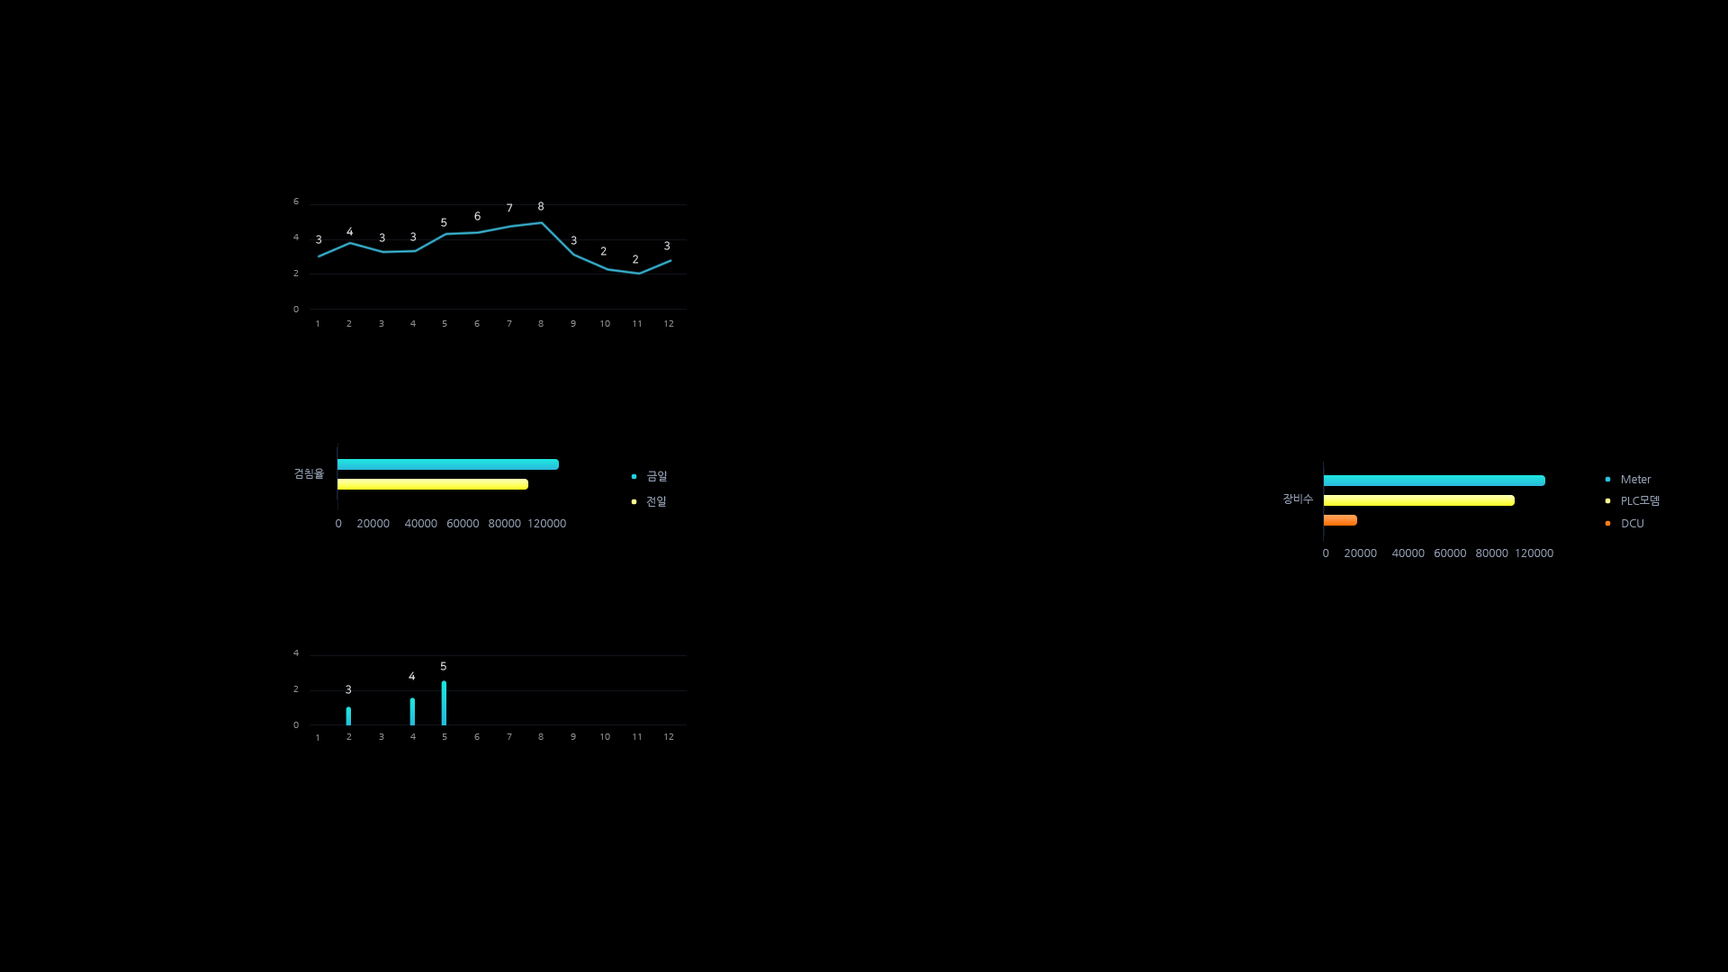
<style>
.page{position:relative;width:1728px;height:972px;background:#000000}
.page>*{position:absolute;margin:0}
.t1{font:9px/36px "NanumGothic";color:#8e8e8e}
.t2{font:10.8px "NanumSquareR"}
.t3{font:9px "NanumGothic"}
.t4{font:9px "NanumGothic";color:#8e8e8e}
.t5{font:10.8px "NanumGothic";color:#94a0b4}
</style>
<div class="page">
<p class="t1" style="left:293px;top:198px;width:6px;height:114px">6<br>4<br>2<br>0</p>
<p class="t2" style="left:507px;top:203px;width:6px;height:9px">7</p>
<p class="t2" style="left:538px;top:202px;width:6px;height:9px">8</p>
<p class="t2" style="left:441px;top:218px;width:6px;height:9px">5</p>
<p class="t2" style="left:474px;top:212px;width:7px;height:8px">6</p>
<p class="t2" style="left:346px;top:227px;width:8px;height:9px">4</p>
<p class="t2" style="left:379px;top:233px;width:6px;height:9px">3</p>
<p class="t2" style="left:410px;top:232px;width:7px;height:9px">3</p>
<p class="t2" style="left:316px;top:235px;width:6px;height:9px">3</p>
<p class="t2" style="left:571px;top:236px;width:6px;height:9px">3</p>
<p class="t2" style="left:664px;top:241px;width:6px;height:9px">3</p>
<p class="t2" style="left:600px;top:247px;width:7px;height:9px">2</p>
<p class="t2" style="left:633px;top:255px;width:6px;height:9px">2</p>
<p class="t3" style="left:316px;top:320px;width:3px;height:7px">1</p>
<p class="t4" style="left:346px;top:320px;width:6px;height:7px">2</p>
<p class="t4" style="left:379px;top:320px;width:5px;height:7px">3</p>
<p class="t4" style="left:410px;top:320px;width:6px;height:7px">4</p>
<p class="t4" style="left:442px;top:320px;width:5px;height:7px">5</p>
<p class="t4" style="left:474px;top:320px;width:6px;height:7px">6</p>
<p class="t4" style="left:507px;top:320px;width:5px;height:7px">7</p>
<p class="t4" style="left:538px;top:320px;width:6px;height:7px">8</p>
<p class="t4" style="left:571px;top:320px;width:5px;height:7px">9</p>
<p class="t4" style="left:600px;top:320px;width:10px;height:7px">10</p>
<p class="t3" style="left:633px;top:320px;width:8px;height:7px">11</p>
<p class="t4" style="left:664px;top:320px;width:10px;height:7px">12</p>
<p class="t5" style="left:294px;top:468px;width:31px;height:11px">검침율</p>
<p class="t5" style="left:647px;top:471px;width:20px;height:11px">금일</p>
<p class="t5" style="left:1622px;top:475px;width:30px;height:8px">Meter</p>
<p class="t5" style="left:646px;top:496px;width:20px;height:11px">전일</p>
<p class="t5" style="left:1283px;top:494px;width:30px;height:10px">장비수</p>
<p class="t5" style="left:1622px;top:496px;width:38px;height:10px">PLC모뎀</p>
<p class="t5" style="left:336px;top:519px;width:230px;height:8px">0     20000     40000   60000   80000  120000</p>
<p class="t5" style="left:1622px;top:519px;width:21px;height:8px">DCU</p>
<p class="t5" style="left:1323px;top:549px;width:230px;height:8px">0     20000     40000   60000   80000  120000</p>
<p class="t1" style="left:293px;top:650px;width:6px;height:78px">4<br>2<br>0</p>
<p class="t2" style="left:440px;top:662px;width:6px;height:8px">5</p>
<p class="t2" style="left:409px;top:671px;width:7px;height:9px">4</p>
<p class="t2" style="left:346px;top:685px;width:6px;height:9px">3</p>
<p class="t3" style="left:316px;top:734px;width:3px;height:7px">1</p>
<p class="t4" style="left:346px;top:734px;width:6px;height:6px">2</p>
<p class="t4" style="left:379px;top:734px;width:5px;height:6px">3</p>
<p class="t4" style="left:410px;top:734px;width:6px;height:6px">4</p>
<p class="t4" style="left:442px;top:734px;width:5px;height:6px">5</p>
<p class="t4" style="left:474px;top:734px;width:6px;height:6px">6</p>
<p class="t4" style="left:507px;top:734px;width:5px;height:6px">7</p>
<p class="t4" style="left:538px;top:734px;width:6px;height:6px">8</p>
<p class="t4" style="left:571px;top:734px;width:5px;height:6px">9</p>
<p class="t4" style="left:600px;top:734px;width:10px;height:6px">10</p>
<p class="t3" style="left:633px;top:734px;width:8px;height:6px">11</p>
<p class="t4" style="left:664px;top:734px;width:10px;height:6px">12</p>
</div>
